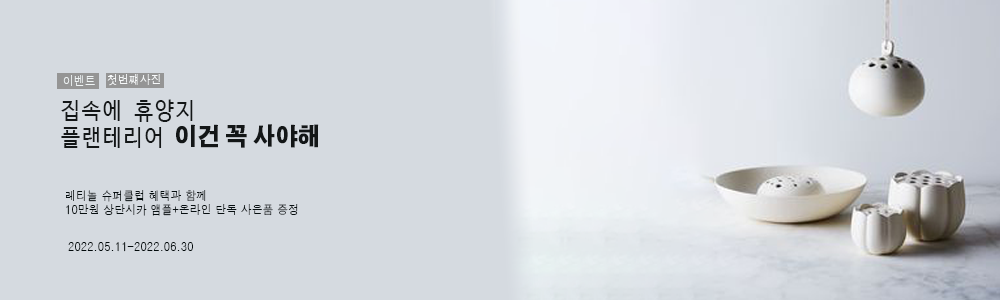
<style>
.page{position:relative;width:1000px;height:300px;background:#d5dae0}
.page>*{position:absolute;margin:0}
.t1{font:12px "Haansoft-Dotum";letter-spacing:0.01em;color:#eff4f5;text-transform:uppercase;scale:0.9 1}
.t2{font:12px "Haansoft-Dotum";letter-spacing:0.01em;color:#f7f9fa;text-transform:uppercase;scale:0.9 1}
.t3{font:23px/26.8px "D2Codingligature";letter-spacing:0.01em;color:#131617;text-transform:uppercase;scale:0.9 1}
.t4{font:24px/26.8px "AdobeGothicStd-Bold";letter-spacing:0.01em;color:#131617;text-transform:uppercase;font-weight:bold;scale:0.9 1}
.t5{font:12px/14px "Haansoft-Dotum";letter-spacing:0.01em;color:#070f11;text-transform:uppercase;scale:0.9 1}
.t6{font:12px "Haansoft-Dotum";letter-spacing:0.01em;color:#020a0c;text-transform:uppercase;scale:0.9 1}
</style>
<div class="page">
<p class="t1" style="left:63px;top:75px;width:32px;height:11px">이벤트</p>
<p class="t2" style="left:107px;top:74px;width:53px;height:12px">첫번쨰사진</p>
<p class="t3" style="left:61px;top:99px;width:258px;height:49px">집속에 휴양지<br>플랜테리어 <span class="t4">이건 꼭 사야해</span></p>
<p class="t5" style="left:66px;top:190px;width:232px;height:26px">레티놀 슈퍼클럽 혜택과 함께<br>10만원 상단시카 앰플+온라인 단독 사은품 증정</p>
<p class="t6" style="left:68px;top:242px;width:125px;height:10px">2022.05.11-2022.06.30</p>
</div>
